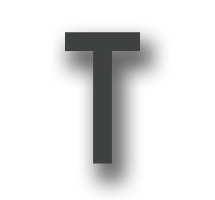
<style>
.page{position:relative;width:215px;height:200px;background:#ffffff}
.page>*{position:absolute;margin:0}
.t1{font:150px "Manteka";color:#3f4040}
</style>
<div class="page">
<p class="t1" style="left:65px;top:32px;width:75px;height:132px">T</p>
</div>
